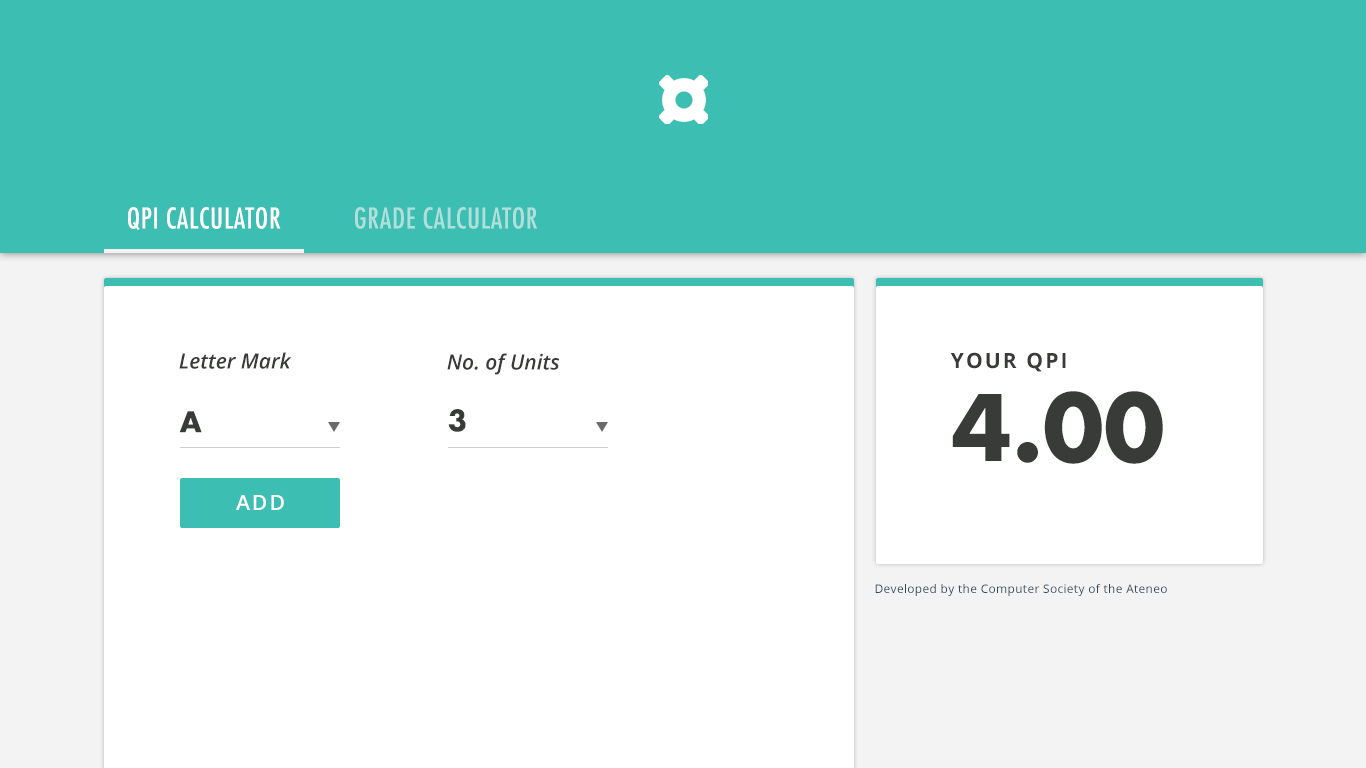
<style>
.page{position:relative;width:1366px;height:768px;background:#ffffff}
.page>*{position:absolute;margin:0}
.t1{font:28px "FuturaLT-Condensed";letter-spacing:0.025em;color:#ffffff;text-transform:uppercase}
.t2{font:28px "FuturaLT-Condensed";letter-spacing:0.025em;color:#b0e0db;text-transform:uppercase}
.t3{font:21px "OpenSans-SemiboldItalic";color:#383b37}
.t4{font:21px "OpenSans-Bold";letter-spacing:0.1em;color:#383b37;text-transform:uppercase}
.t5{font:89px "FuturaLT-CondensedBold";color:#383b37;text-transform:uppercase}
.t6{font:28px "FuturaLT-CondensedBold";color:#383b37}
.t7{font:21px "OpenSans-Semibold";letter-spacing:0.1em;color:#ffffff;text-transform:uppercase}
.t8{font:12px "OpenSans";letter-spacing:0.025em;color:#31475a}
</style>
<div class="page">
<p class="t1" style="left:128px;top:207px;width:153px;height:23px">QPI Calculator</p>
<p class="t2" style="left:355px;top:207px;width:182px;height:22px">Grade Calculator</p>
<p class="t3" style="left:179px;top:352px;width:113px;height:17px">Letter Mark</p>
<p class="t3" style="left:447px;top:353px;width:113px;height:22px">No. of Units</p>
<p class="t4" style="left:950px;top:352px;width:116px;height:20px">Your QPI</p>
<p class="t5" style="left:952px;top:391px;width:211px;height:73px">4.00</p>
<p class="t6" style="left:179px;top:411px;width:23px;height:22px">A</p>
<p class="t6" style="left:448px;top:409px;width:18px;height:23px">3</p>
<p class="t7" style="left:236px;top:495px;width:48px;height:15px">Add</p>
<p class="t8" style="left:875px;top:584px;width:292px;height:12px">Developed by the Computer Society of the Ateneo</p>
</div>
